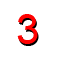
<style>
.page{position:relative;width:58px;height:59px;background:#ffffff}
.page>*{position:absolute;margin:0}
.t1{font:41.7px "ArialMT";color:#ff0101}
.t2{font:41.7px "ArialMT"}
</style>
<div class="page">
<p class="t1" style="left:17px;top:14px;width:21px;height:30px">3</p>
<p class="t2" style="left:18px;top:16px;width:21px;height:30px">3</p>
</div>
